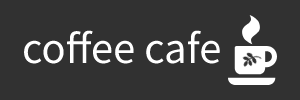
<style>
.page{position:relative;width:300px;height:100px;background:#313131}
.page>*{position:absolute;margin:0}
.t1{font:40px "NotoSansKR-Regular";color:#ffffff}
</style>
<div class="page">
<p class="t1" style="left:24px;top:30px;width:196px;height:34px">coffee cafe</p>
</div>
